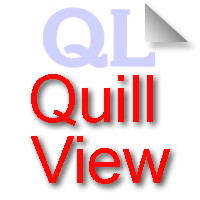
<style>
.page{position:relative;width:200px;height:200px;background:#ffffff}
.page>*{position:absolute;margin:0}
.t1{font:64.8px "ArialMT";color:#ff0705}
</style>
<div class="page">
<p class="t1" style="left:31px;top:74px;width:122px;height:52px">Quill</p>
<p class="t1" style="left:31px;top:136px;width:139px;height:48px">View</p>
</div>
